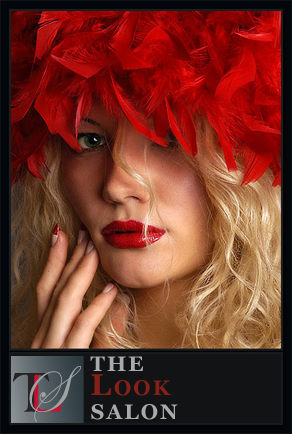
<style>
.page{position:relative;width:292px;height:434px}
.page>*{position:absolute;margin:0}
.t1{font:30px/24px "Georgia-Bold";letter-spacing:0.1em;color:#aaaaaa;font-variant:small-caps}
.t2{font:30px/24px "Georgia-Bold";letter-spacing:0.1em;color:#872019;font-variant:small-caps}
</style>
<div class="page">
<p class="t1" style="left:90px;top:356px;width:88px;height:64px">the <br><span class="t2">Look<br></span>salon</p>
</div>
